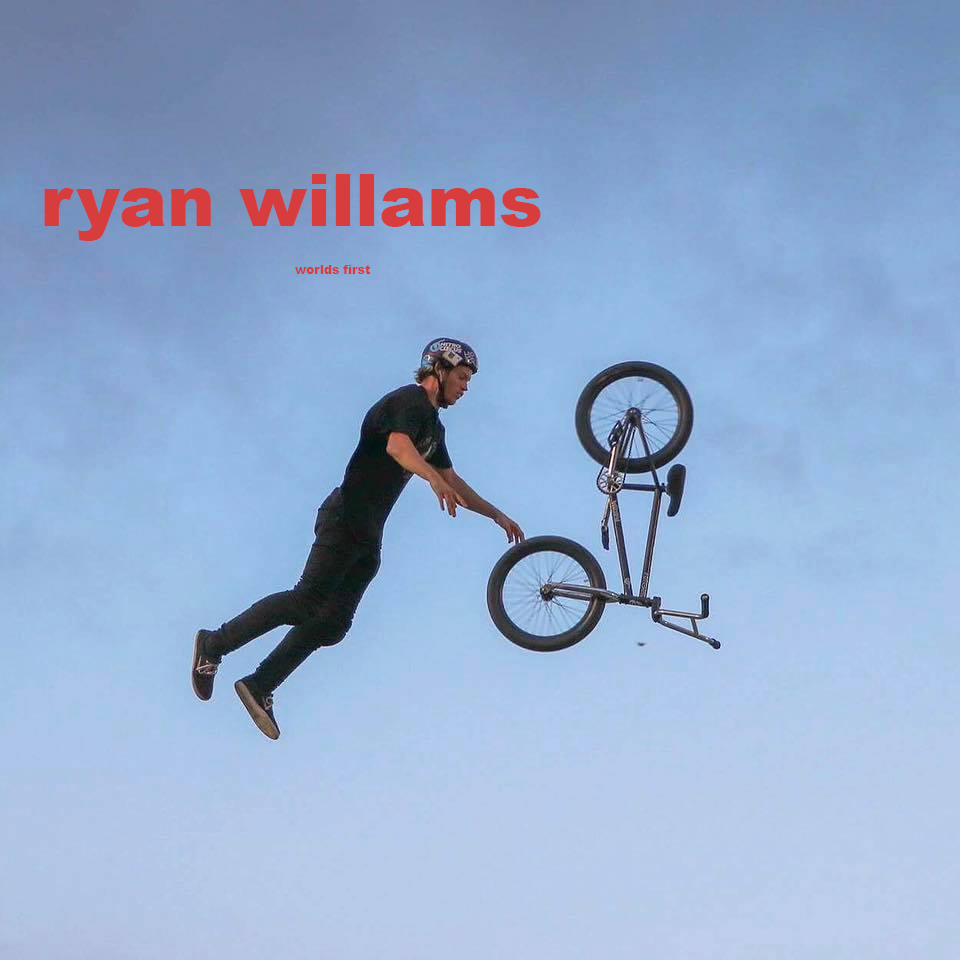
<style>
.page{position:relative;width:960px;height:960px}
.page>*{position:absolute;margin:0}
.t1{font:72px "Arial-Black";color:#d73d3d}
.t2{font:12px "Arial-Black";color:#d73d3d}
</style>
<div class="page">
<p class="t1" style="left:44px;top:174px;width:497px;height:67px">ryan willams</p>
<p class="t2" style="left:295px;top:265px;width:75px;height:9px">worlds first</p>
</div>
